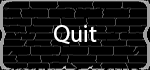
<style>
.page{position:relative;width:150px;height:70px;background:#000000}
.page>*{position:absolute;margin:0}
.t1{font:24px "MyriadPro-Regular";color:#ffffff}
</style>
<div class="page">
<p class="t1" style="left:54px;top:25px;width:43px;height:19px">Quit</p>
</div>
